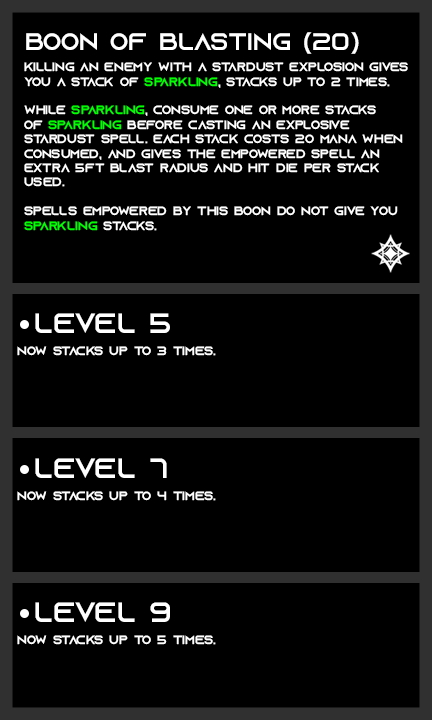
<style>
.page{position:relative;width:432px;height:720px;background:#000000}
.page>*{position:absolute;margin:0}
.t1{font:24px "AzonixRegular";color:#ffffff}
.t2{font:12px "AzonixRegular";color:#ffffff}
.t3{font:12px "AzonixRegular";color:#00ff00}
.t4{font:28px "AzonixRegular";color:#ffffff}
</style>
<div class="page">
<p class="t1" style="left:26px;top:32px;width:333px;height:22px">boon of blasting (20)</p>
<p class="t2" style="left:24px;top:62px;width:384px;height:169px">killing an enemy with a stardust explosion gives<br>you a stack of <span class="t3">sparkling</span>, stacks up to 2 times.<br><br>while <span class="t3">sparkling</span>, consume one or more stacks<br>of <span class="t3">sparkling</span> before casting an explosive <br>stardust spell. each stack costs 2o mana when<br>consumed, and gives the empowered spell an <br>extra 5ft blast radius and hit die per stack <br>used.<br><br>spells empowered by this boon do not give you<br><span class="t3">sparkling</span> stacks.</p>
<p class="t4" style="left:35px;top:313px;width:135px;height:20px">level 5</p>
<p class="t2" style="left:17px;top:346px;width:199px;height:10px">now stacks up to 3 times.</p>
<p class="t4" style="left:35px;top:458px;width:132px;height:20px">level 7</p>
<p class="t2" style="left:17px;top:491px;width:199px;height:10px">now stacks up to 4 times.</p>
<p class="t4" style="left:35px;top:602px;width:135px;height:20px">level 9</p>
<p class="t2" style="left:17px;top:635px;width:199px;height:10px">now stacks up to 5 times.</p>
</div>
